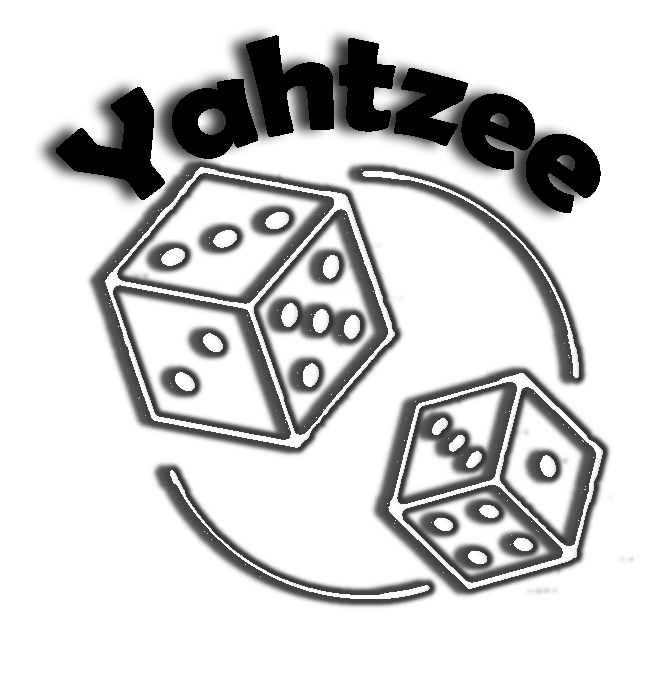
<style>
.page{position:relative;width:661px;height:673px;background:#ffffff}
.page>*{position:absolute;margin:0}
.t1{font:140px "BerlinSansFBDemi-Bold";color:#010101;scale:0.8 1}
</style>
<div class="page">
<p class="t1" style="left:56px;top:35px;width:545px;height:178px">Yahtzee</p>
</div>
